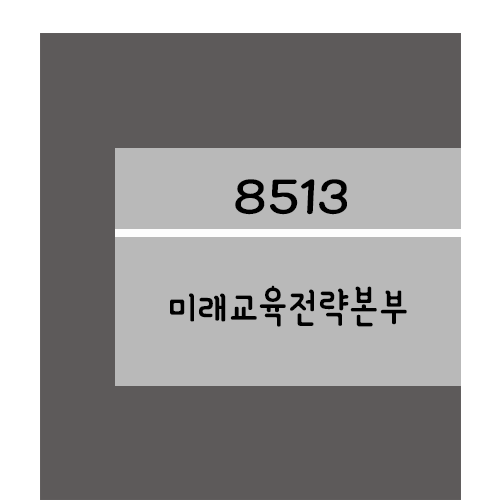
<style>
.page{position:relative;width:500px;height:500px;background:#5d5a5a}
.page>*{position:absolute;margin:0}
.t1{font:61.2px "YanoljaYacheR";color:#000000;scale:1.18 1}
.t2{font:48px "YanoljaYacheR";color:#000000}
</style>
<div class="page">
<p class="t1" style="left:235px;top:179px;width:112px;height:36px">8513</p>
<p class="t2" style="left:170px;top:285px;width:237px;height:42px">미래교육전략본부</p>
</div>
